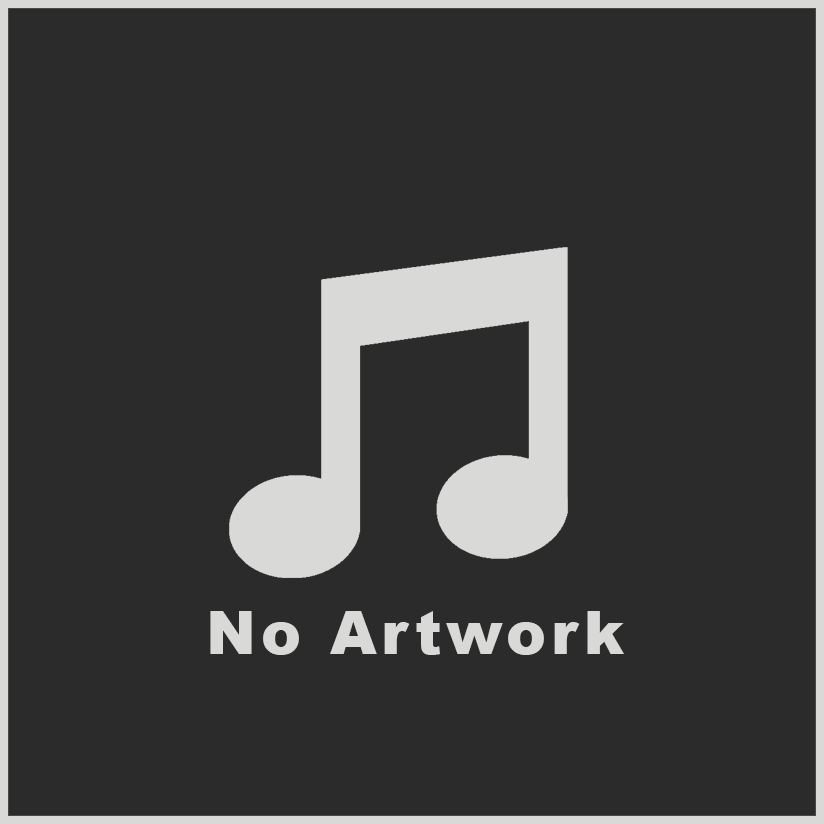
<style>
.page{position:relative;width:824px;height:824px;background:#2b2b2b}
.page>*{position:absolute;margin:0}
.t1{font:60px "Arial-Black";letter-spacing:0.075em;color:#d9d9d8}
</style>
<div class="page">
<p class="t1" style="left:210px;top:611px;width:414px;height:44px">No Artwork</p>
</div>
